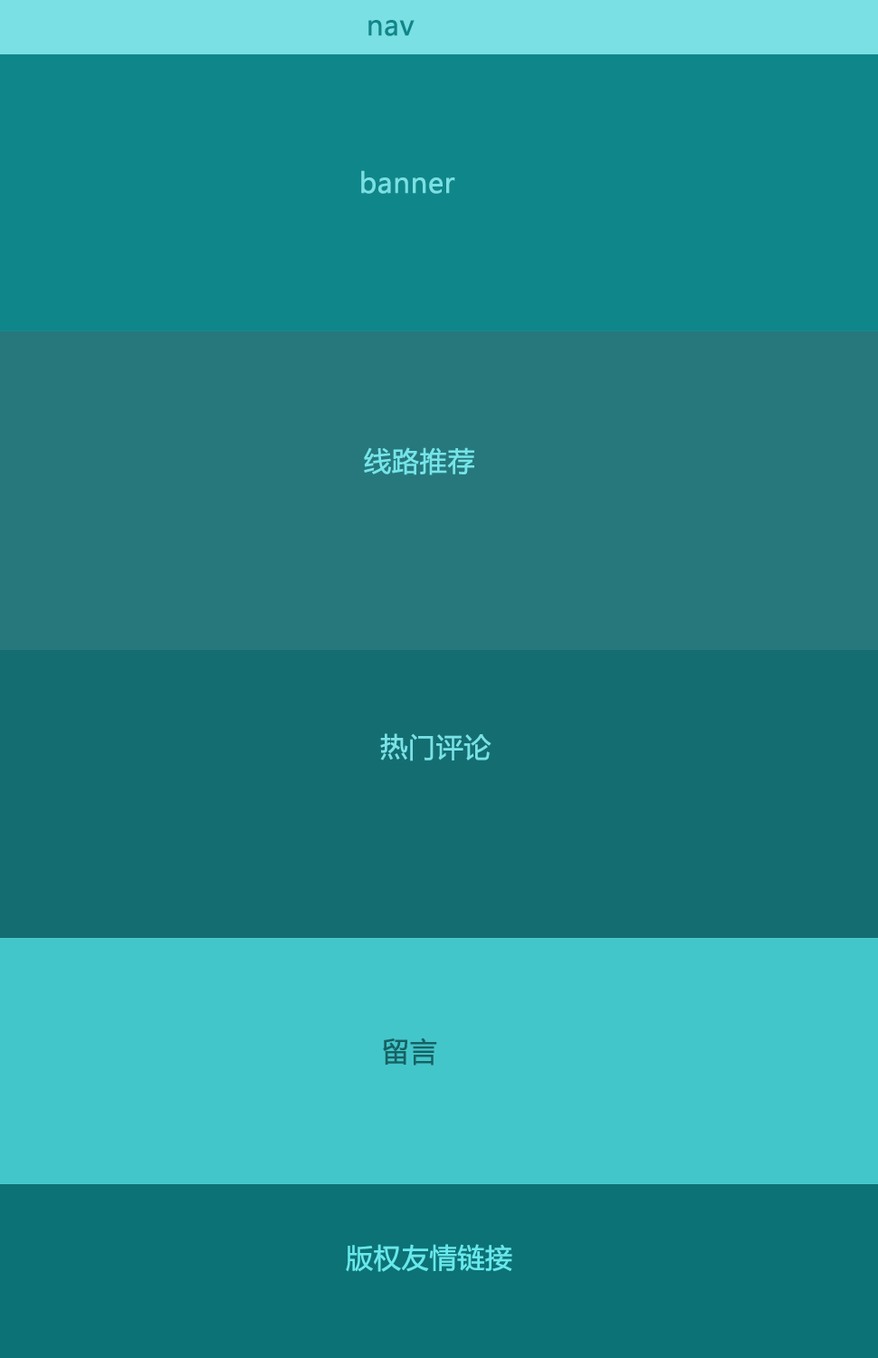
<style>
.page{position:relative;width:878px;height:1358px;background:#26787c}
.page>*{position:absolute;margin:0}
.t1{font:27.2px "MicrosoftYaHei";color:#0f868a;font-weight:bold}
.t2{font:27.2px "MicrosoftYaHei";color:#7ae0e3;font-weight:bold}
.t3{font:27.2px "MicrosoftYaHei";color:#75e5e9;font-weight:bold}
.t4{font:27.2px "MicrosoftYaHei";color:#78e2e6;font-weight:bold}
.t5{font:27.2px "MicrosoftYaHei";color:#166163;font-weight:bold}
.t6{font:27.2px "MicrosoftYaHei";color:#68e8ec;font-weight:bold}
</style>
<div class="page">
<p class="t1" style="left:368px;top:20px;width:47px;height:16px">nav</p>
<p class="t2" style="left:361px;top:170px;width:94px;height:24px">banner</p>
<p class="t3" style="left:364px;top:447px;width:110px;height:28px">线路推荐</p>
<p class="t4" style="left:380px;top:733px;width:112px;height:28px">热门评论</p>
<p class="t5" style="left:383px;top:1037px;width:54px;height:29px">留言</p>
<p class="t6" style="left:346px;top:1244px;width:166px;height:28px">版权友情链接</p>
</div>
